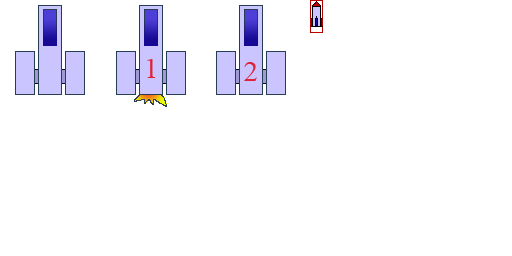
<style>
.page{position:relative;width:512px;height:256px;background:#ffffff}
.page>*{position:absolute;margin:0}
.t1{font:29.2px "TimesNewRomanPSMT";color:#df243a}
</style>
<div class="page">
<p class="t1" style="left:147px;top:59px;width:8px;height:19px">1</p>
<p class="t1" style="left:244px;top:62px;width:13px;height:19px">2</p>
</div>
